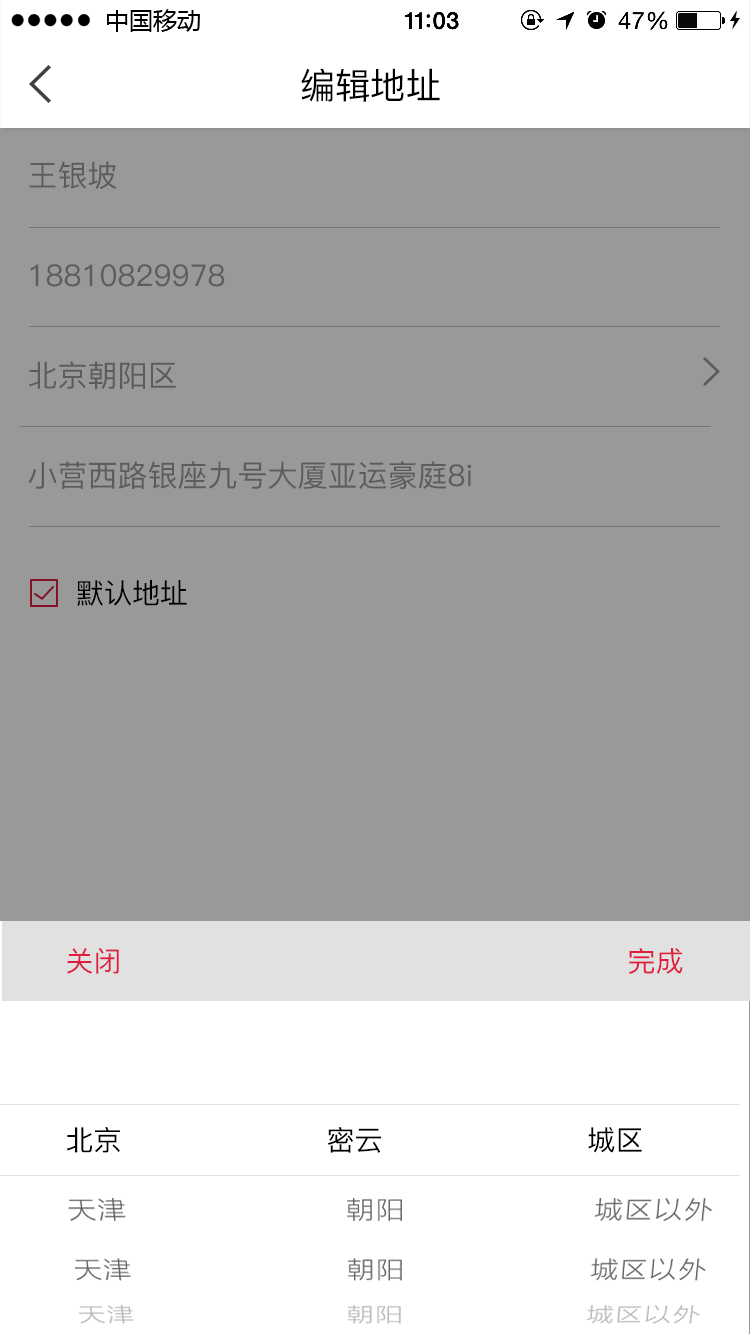
<style>
.page{position:relative;width:750px;height:1334px;background:#999999}
.page>*{position:absolute;margin:0}
.t1{font:35.7px "PingFang-SC-Medium";color:#000000}
.t2{font:30px/100px "PingFang-SC-Medium";color:#5c5c5c}
.t3{font:28px "PingFang-SC-Medium";color:#000000}
.t4{font:28px "PingFang-SC-Medium";color:#df1e3e}
</style>
<div class="page">
<p class="t1" style="left:301px;top:68px;width:139px;height:34px">编辑地址</p>
<p class="t2" style="left:28px;top:161px;width:444px;height:328px">王银坡<br>18810829978<br>北京朝阳区<br>小营西路银座九号大厦亚运豪庭8i</p>
<p class="t3" style="left:77px;top:580px;width:110px;height:26px">默认地址</p>
<p class="t4" style="left:67px;top:948px;width:52px;height:26px">关闭</p>
<p class="t4" style="left:629px;top:948px;width:54px;height:26px">完成</p>
<p class="t3" style="left:67px;top:1127px;width:575px;height:26px">北京                      密云                      城区</p>
</div>
